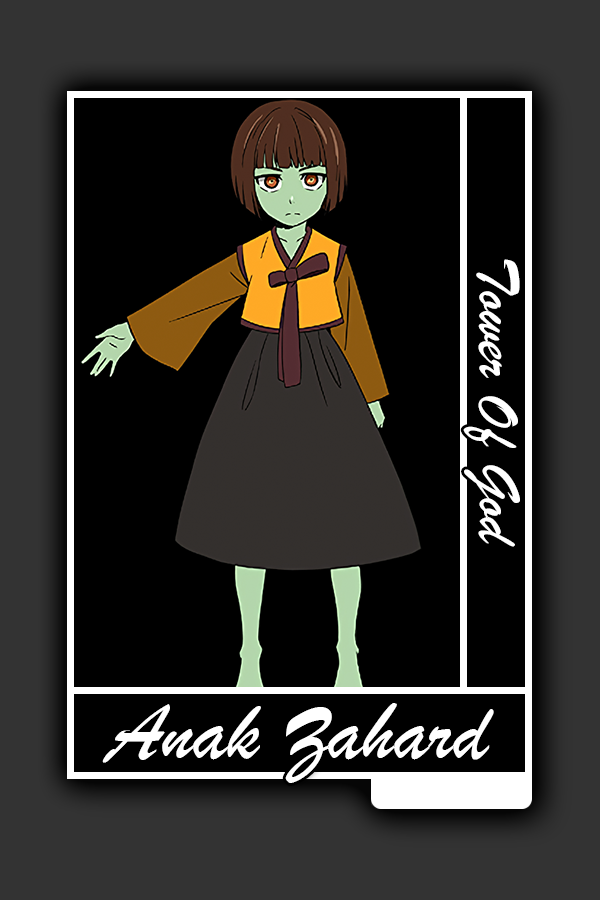
<style>
.page{position:relative;width:600px;height:900px;background:#000000}
.page>*{position:absolute;margin:0}
.t1{font:61.5px "BrushScriptMT";color:#ffffff}
.t2{font:84.8px "BrushScriptMT";color:#ffffff}
</style>
<div class="page">
<p class="t1" style="left:463px;top:259px;width:57px;height:288px;rotate:90deg">Tower Of God</p>
<p class="t2" style="left:102px;top:703px;width:392px;height:80px">Anak Zahard</p>
</div>
